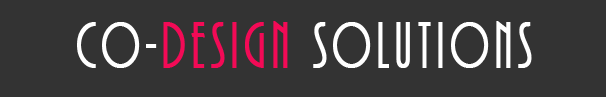
<style>
.page{position:relative;width:606px;height:97px;background:#333333}
.page>*{position:absolute;margin:0}
.t1{font:67px "ARBONNIE";letter-spacing:0.1em;color:#ffffff;font-weight:bold;scale:0.78 1}
.t2{font:67px "ARBONNIE";letter-spacing:0.1em;color:#f30a56;font-weight:bold;scale:0.78 1}
</style>
<div class="page">
<p class="t1" style="left:77px;top:21px;width:455px;height:47px">co-<span class="t2">design</span> solutions</p>
</div>
